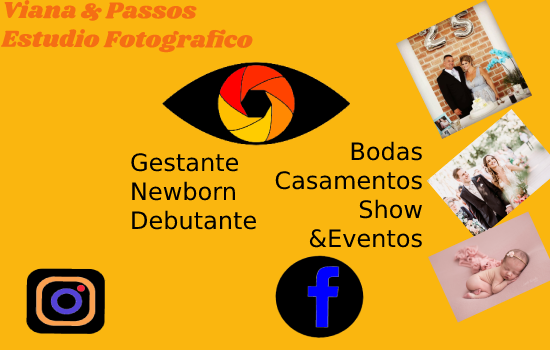
<style>
.page{position:relative;width:550px;height:350px;background:#fab60f}
.page>*{position:absolute;margin:0}
.t1{font:24px "DejaVuSans";color:#000000}
</style>
<div class="page">
<p class="t1" style="left:275px;top:141px;width:147px;height:107px;text-align:right">Bodas<br>Casamentos<br>Show <br>&amp;Eventos</p>
<p class="t1" style="left:131px;top:153px;width:125px;height:77px">Gestante<br>Newborn<br>Debutante</p>
</div>
